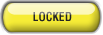
<style>
.page{position:relative;width:103px;height:35px}
.page>*{position:absolute;margin:0}
.t1{font:12px "Helvetica-Condensed-Bold";letter-spacing:-0.01em;color:#242424}
</style>
<div class="page">
<p class="t1" style="left:33px;top:11px;width:39px;height:11px">LOCKED</p>
</div>
